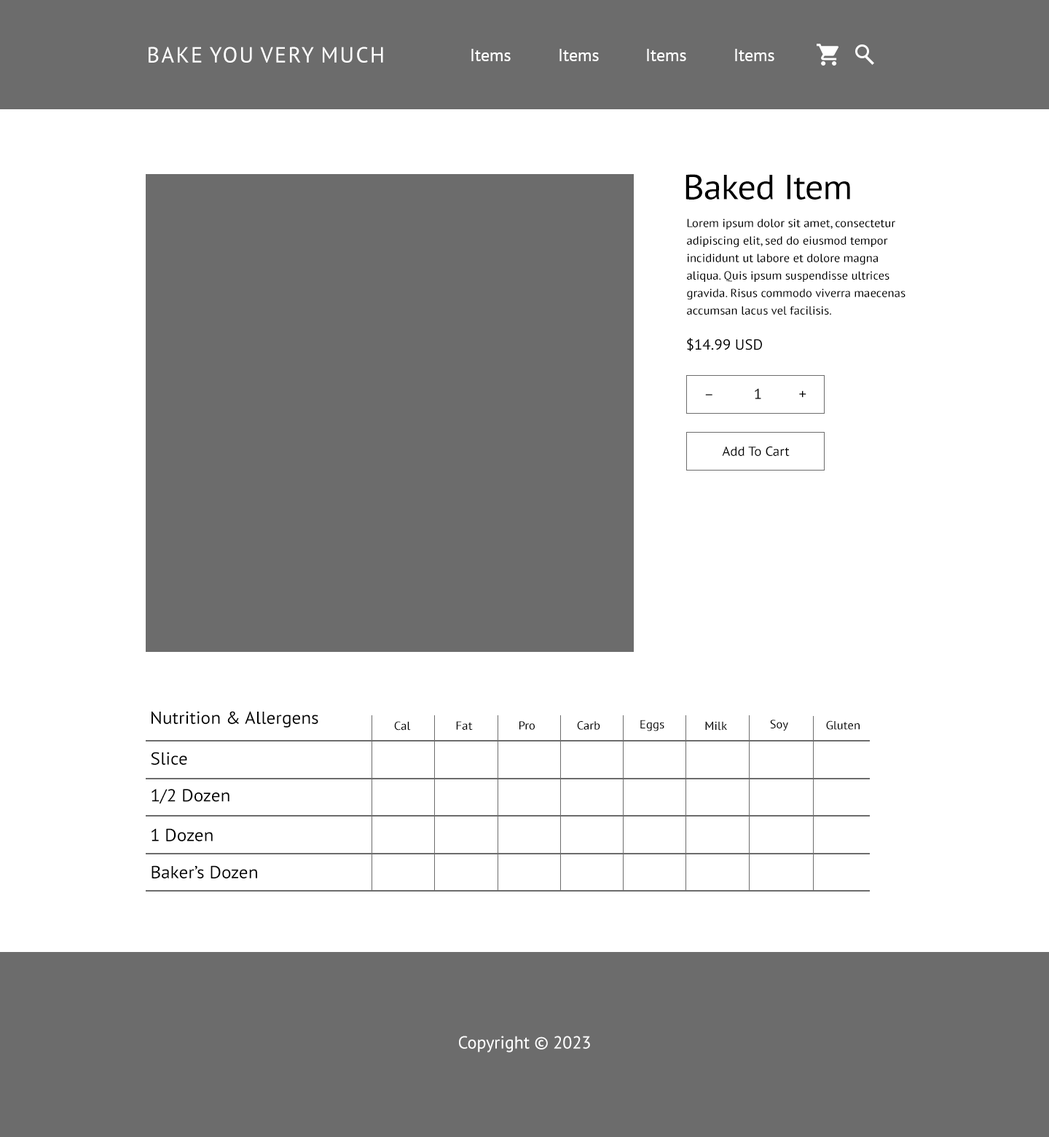
<style>
.page{position:relative;width:1049px;height:1137px;background:#ffffff}
.page>*{position:absolute;margin:0}
.t1{font:21.9px "PTSans-Regular";color:#ffffff;text-transform:uppercase}
.t2{font:17.5px "PTSans-Regular";color:#ffffff}
.t3{font:35px "PTSans-Regular";letter-spacing:-0.02em;color:#000000;scale:1.05 1}
.t4{font:11.7px/17.5px "PTSans-Regular";color:#000000;scale:1.05 1}
.t5{font:14.6px "PTSans-Regular";color:#000000;scale:1.05 1}
.t6{font:13.1px "PTSans-Regular";color:#000000;scale:1.05 1}
.t7{font:17.5px "PTSans-Regular";color:#000000;scale:1.05 1}
.t8{font:11.7px "PTSans-Regular";color:#000000;scale:1.05 1}
</style>
<div class="page">
<p class="t1" style="left:149px;top:47px;width:234px;height:16px">Bake you very much</p>
<p class="t2" style="left:471px;top:49px;width:40px;height:12px">Items</p>
<p class="t2" style="left:559px;top:49px;width:40px;height:12px">Items</p>
<p class="t2" style="left:647px;top:49px;width:39px;height:12px">Items</p>
<p class="t2" style="left:735px;top:49px;width:39px;height:12px">Items</p>
<p class="t3" style="left:685px;top:174px;width:165px;height:26px">Baked Item</p>
<p class="t4" style="left:687px;top:219px;width:218px;height:96px">Lorem ipsum dolor sit amet, consectetur adipiscing elit, sed do eiusmod tempor incididunt ut labore et dolore magna aliqua. Quis ipsum suspendisse ultrices gravida. Risus commodo viverra maecenas accumsan lacus vel facilisis.</p>
<p class="t5" style="left:687px;top:338px;width:75px;height:13px">$14.99 USD</p>
<p class="t5" style="left:705px;top:388px;width:101px;height:11px">–          1         +</p>
<p class="t6" style="left:722px;top:446px;width:68px;height:10px">Add To Cart</p>
<p class="t7" style="left:151px;top:711px;width:167px;height:17px">Nutrition &amp; Allergens</p>
<p class="t8" style="left:394px;top:721px;width:17px;height:10px">Cal</p>
<p class="t8" style="left:456px;top:721px;width:17px;height:9px">Fat</p>
<p class="t8" style="left:519px;top:721px;width:16px;height:9px">Pro</p>
<p class="t8" style="left:577px;top:721px;width:23px;height:9px">Carb</p>
<p class="t8" style="left:640px;top:720px;width:24px;height:11px">Eggs</p>
<p class="t8" style="left:705px;top:721px;width:22px;height:10px">Milk</p>
<p class="t8" style="left:770px;top:720px;width:18px;height:11px">Soy</p>
<p class="t8" style="left:826px;top:720px;width:33px;height:10px">Gluten</p>
<p class="t7" style="left:151px;top:752px;width:36px;height:13px">Slice</p>
<p class="t7" style="left:151px;top:789px;width:78px;height:15px">1/2 Dozen</p>
<p class="t7" style="left:151px;top:828px;width:62px;height:13px">1 Dozen</p>
<p class="t7" style="left:151px;top:865px;width:106px;height:13px">Baker’s Dozen</p>
<p class="t2" style="left:459px;top:1036px;width:131px;height:16px">Copyright © 2023</p>
</div>
